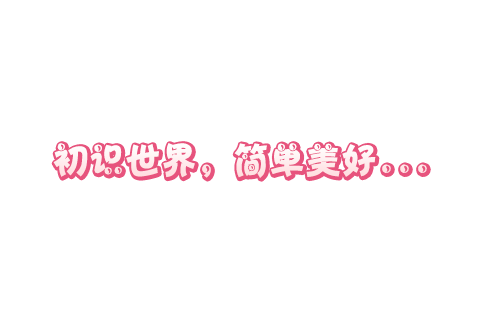
<style>
.page{position:relative;width:477px;height:327px;background:#ffffff}
.page>*{position:absolute;margin:0}
.t1{font:36px "Jtaiji";color:#ffffff}
</style>
<div class="page">
<p class="t1" style="left:53px;top:143px;width:374px;height:35px">初识世界，简单美好...</p>
</div>
